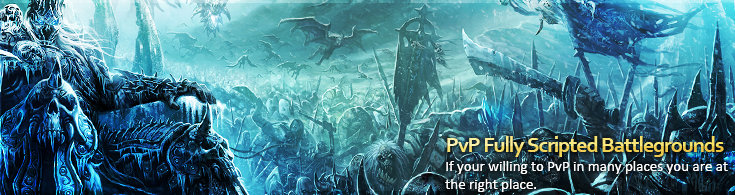
<style>
.page{position:relative;width:735px;height:195px}
.page>*{position:absolute;margin:0}
.t1{font:22px "Corbel-Bold";letter-spacing:-0.05em}
.t2{font:15px "Calibri";color:#ffffff}
</style>
<div class="page">
<p class="t1" style="left:447px;top:136px;width:277px;height:21px">PvP Fully Scripted Battlegrounds</p>
<p class="t1" style="left:447px;top:136px;width:277px;height:21px">PvP Fully Scripted Battlegrounds</p>
<p class="t2" style="left:445px;top:161px;width:283px;height:31px">If your willing to PvP in many places you are at<br>the right place.</p>
<p class="t2" style="left:445px;top:161px;width:283px;height:31px">If your willing to PvP in many places you are at<br>the right place.</p>
</div>
